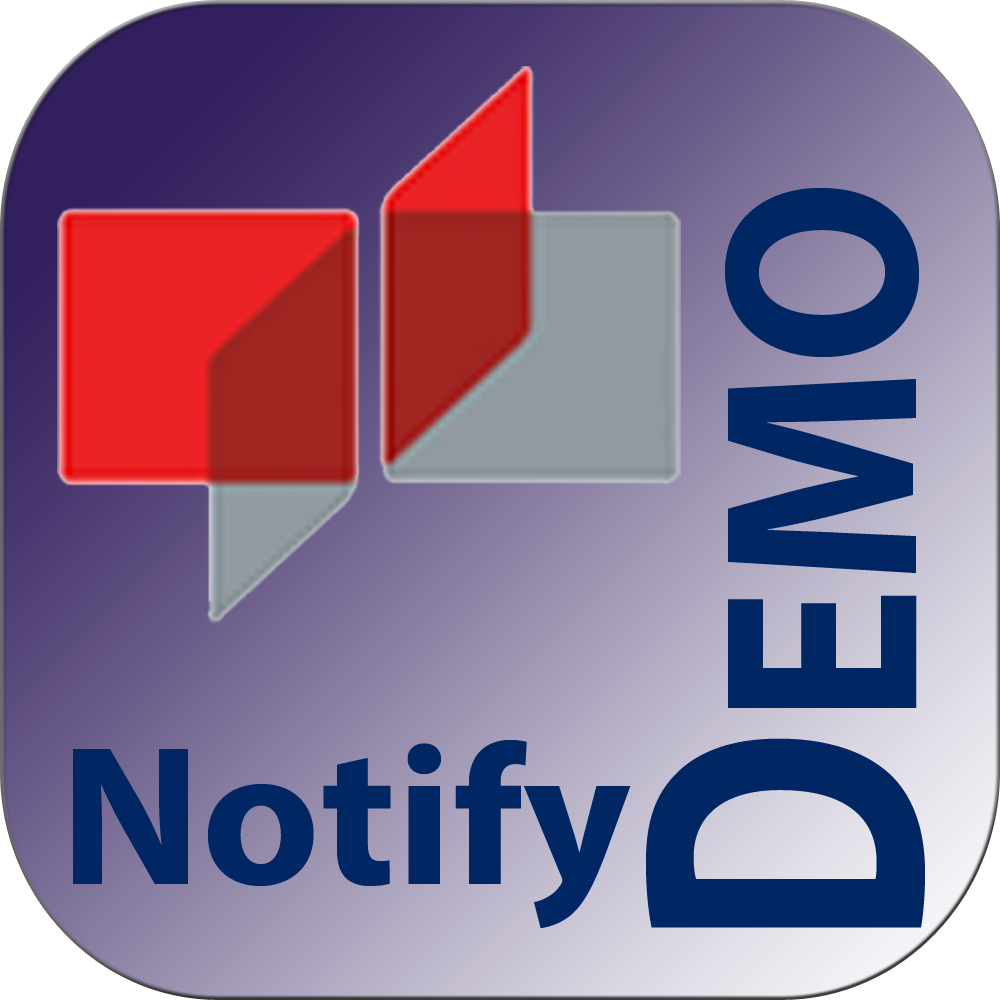
<style>
.page{position:relative;width:1000px;height:1000px}
.page>*{position:absolute;margin:0}
.t1{font:279.7px "MyriadPro-Bold";color:#002664;scale:0.93 1}
.t2{font:200px "MyriadPro-Bold";color:#002664;scale:1.03 1}
.t3{font:406.3px "MyriadPro-Bold";color:#002664;scale:0.78 1}
</style>
<div class="page">
<p class="t1" style="left:725px;top:188px;width:194px;height:520px;rotate:-90deg">EMO</p>
<p class="t2" style="left:73px;top:740px;width:558px;height:189px">Notify</p>
<p class="t3" style="left:646px;top:738px;width:279px;height:190px;rotate:-90deg">D</p>
</div>
